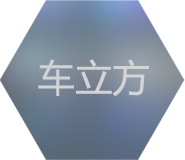
<style>
.page{position:relative;width:185px;height:160px;background:#ffffff}
.page>*{position:absolute;margin:0}
.t1{font:37.5px "MicrosoftYaHei";color:#d4d3d3}
</style>
<div class="page">
<p class="t1" style="left:38px;top:59px;width:111px;height:38px">车立方</p>
</div>
